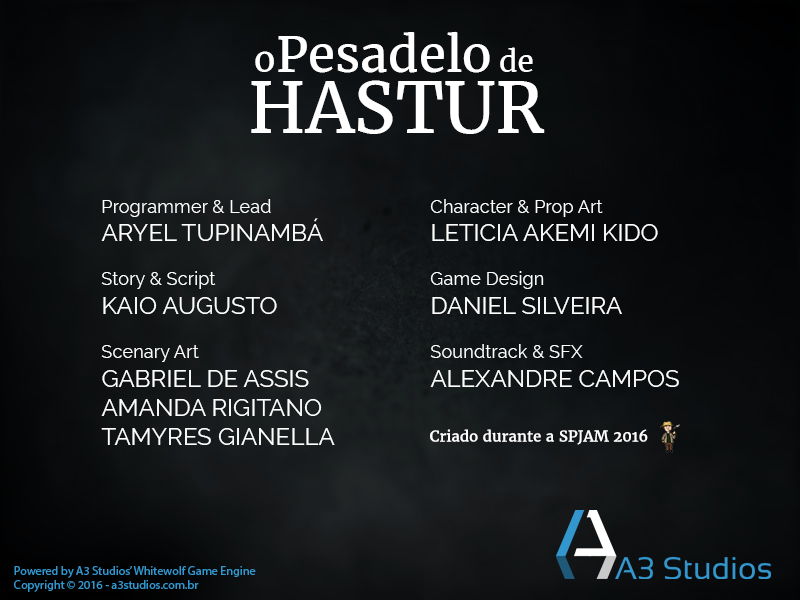
<style>
.page{position:relative;width:800px;height:600px}
.page>*{position:absolute;margin:0}
.t1{font:49.5px "Merriweather-Regular";color:#ffffff}
.t2{font:35.8px "Merriweather-Regular";color:#ffffff}
.t3{font:29.8px "Merriweather-Regular";color:#ffffff}
.t4{font:69.6px "Merriweather-Regular";color:#ffffff}
.t5{font:24px "Raleway-Regular";color:#ffffff}
.t6{font:18.3px "Raleway-Regular";color:#ffffff}
.t7{font:15px "Merriweather-Regular";color:#ffffff}
.t8{font:12.1px "MyriadPro-Regular";color:#3396cc}
</style>
<div class="page">
<p class="t1" style="left:278px;top:31px;width:212px;height:42px">Pesadelo</p>
<p class="t2" style="left:255px;top:51px;width:19px;height:21px">o</p>
<p class="t3" style="left:500px;top:47px;width:33px;height:25px">de</p>
<p class="t4" style="left:251px;top:80px;width:294px;height:54px">HASTUR</p>
<p class="t5" style="left:101px;top:199px;width:234px;height:246px"><span class="t6">Programmer &amp; Lead<br></span>ARYEL TUPINAMBÁ<br><span class="t6"><br>Story &amp; Script<br></span>KAIO AUGUSTO<br><span class="t6"><br>Scenary Art<br></span>GABRIEL DE ASSIS<br>AMANDA RIGITANO<br>TAMYRES GIANELLA</p>
<p class="t6" style="left:430px;top:199px;width:249px;height:188px">Character &amp; Prop Art<br><span class="t5">LETICIA AKEMI KIDO<br></span><br>Game Design<br><span class="t5">DANIEL SILVEIRA<br></span><br>Soundtrack &amp; SFX<br><span class="t5">ALEXANDRE CAMPOS</span></p>
<p class="t7" style="left:430px;top:429px;width:218px;height:16px">Criado durante a SPJAM 2016</p>
<p class="t8" style="left:14px;top:566px;width:242px;height:26px">Powered by A3 Studios’ Whitewolf Game Engine<br>Copyright © 2016 - a3studios.com.br</p>
</div>
